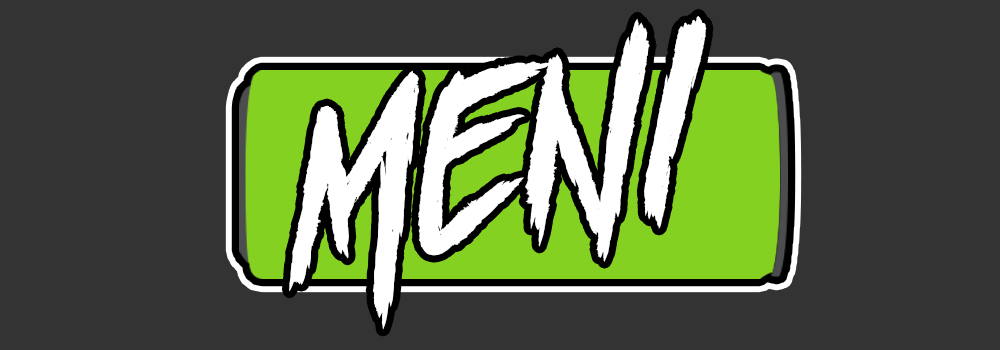
<style>
.page{position:relative;width:1000px;height:350px;background:#333333}
.page>*{position:absolute;margin:0}
.t1{font:242.9px "ActofRejection";color:#ffffff}
</style>
<div class="page">
<p class="t1" style="left:289px;top:16px;width:418px;height:314px;rotate:-9deg">meni</p>
</div>
